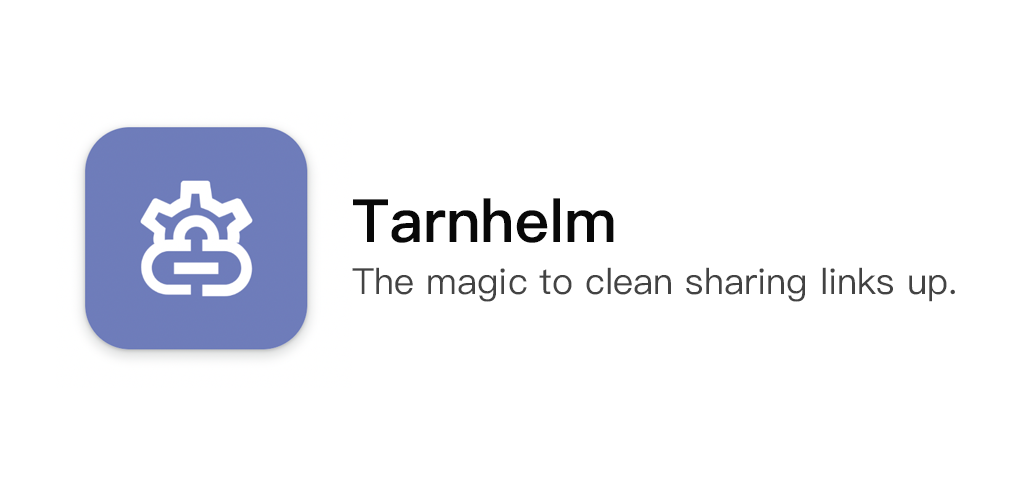
<style>
.page{position:relative;width:1024px;height:500px;background:#ffffff}
.page>*{position:absolute;margin:0}
.t1{font:36px/72px "PingFangSC-Regular";color:#434343}
.t2{font:60px/72px "PingFangSC-Semibold";color:#080808}
</style>
<div class="page">
<p class="t1" style="left:352px;top:198px;width:603px;height:104px"><span class="t2">Tarnhelm<br></span>The magic to clean sharing links up.</p>
</div>
